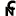
<style>
.page{position:relative;width:16px;height:16px;background:#ffffff}
.page>*{position:absolute;margin:0}
.t1{font:13.3px "TF2Build";color:#030200}
.t2{font:13.5px "TF2Build";color:#010100}
</style>
<div class="page">
<p class="t1" style="left:5px;top:6px;width:9px;height:10px">n</p>
<p class="t2" style="left:7px;top:0px;width:9px;height:10px">C</p>
</div>
